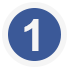
<style>
.page{position:relative;width:70px;height:70px;background:#3b5998}
.page>*{position:absolute;margin:0}
.t1{font:43.8px "Arial-BoldMT";color:#f5f5f5}
</style>
<div class="page">
<p class="t1" style="left:24px;top:19px;width:15px;height:32px">1</p>
</div>
